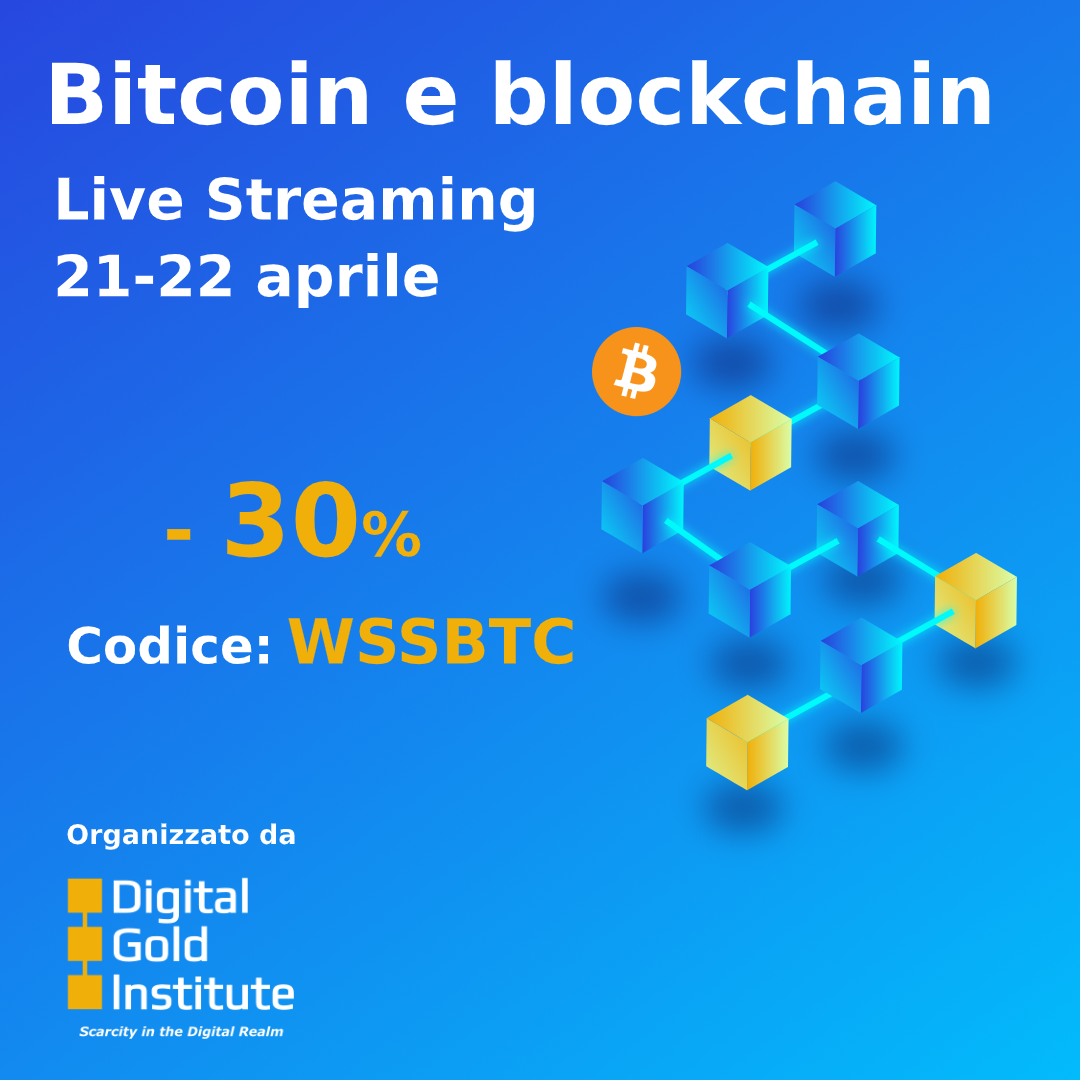
<style>
.page{position:relative;width:1080px;height:1080px}
.page>*{position:absolute;margin:0}
.t1{font:84px "Verdana-Bold";color:#ffffff}
.t2{font:57px "Verdana-Bold";color:#ffffff}
.t3{font:101px "Verdana-Bold";color:#f1af09}
.t4{font:75px "Verdana-Bold";color:#f1af09}
.t5{font:61px "Verdana-Bold";color:#f1af09}
.t6{font:50px "Verdana-Bold";color:#ffffff}
.t7{font:50px "Verdana-Bold";color:#f1af09}
.t8{font:62px "Verdana-Bold";color:#f1af09}
.t9{font:27px "Verdana-Bold";color:#ffffff}
</style>
<div class="page">
<p class="t1" style="left:51px;top:60px;width:939px;height:66px">Bitcoin e blockchain</p>
<p class="t2" style="left:57px;top:176px;width:477px;height:133px">Live Streaming<br><br>21-22 aprile</p>
<p class="t3" style="left:167px;top:481px;width:254px;height:77px"><span class="t4">- </span>30<span class="t5">%</span></p>
<p class="t6" style="left:68px;top:617px;width:505px;height:48px"><span class="t7"><br></span>Codice: <span class="t8">WSSBTC</span></p>
<p class="t9" style="left:67px;top:823px;width:228px;height:27px">Organizzato da</p>
</div>
